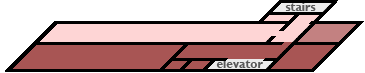
<style>
.page{position:relative;width:365px;height:73px;background:#ffffff}
.page>*{position:absolute;margin:0}
.t1{font:12px "GillSansMT-Bold";color:#595959}
</style>
<div class="page">
<p class="t1" style="left:285px;top:3px;width:31px;height:8px">stairs</p>
<p class="t1" style="left:216px;top:60px;width:47px;height:8px">elevator</p>
</div>
